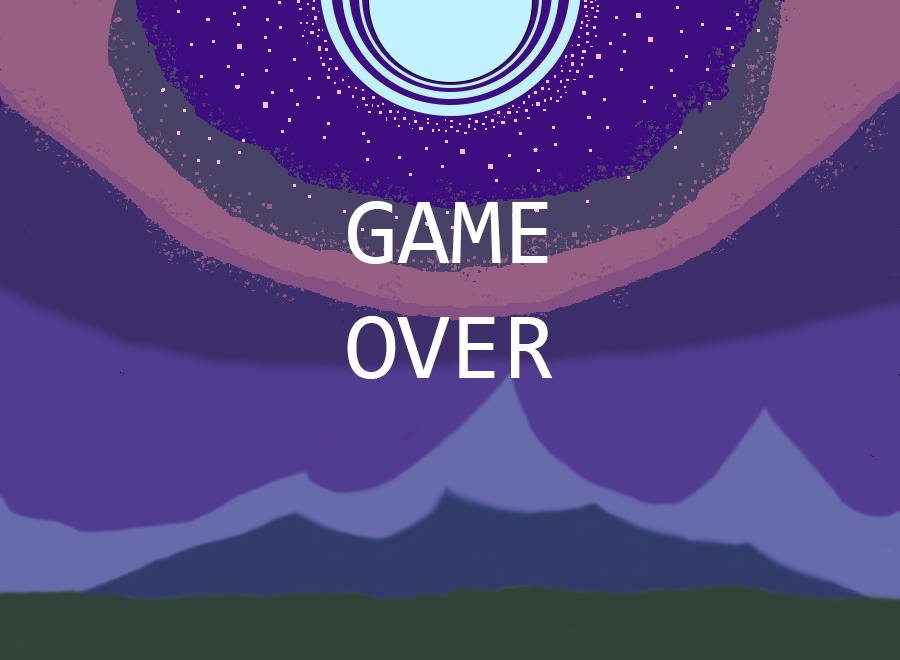
<style>
.page{position:relative;width:900px;height:660px}
.page>*{position:absolute;margin:0}
.t1{font:96px "Consolas";color:#ffffff}
</style>
<div class="page">
<p class="t1" style="left:347px;top:201px;width:206px;height:178px;text-align:center">GAME <br>OVER</p>
</div>
